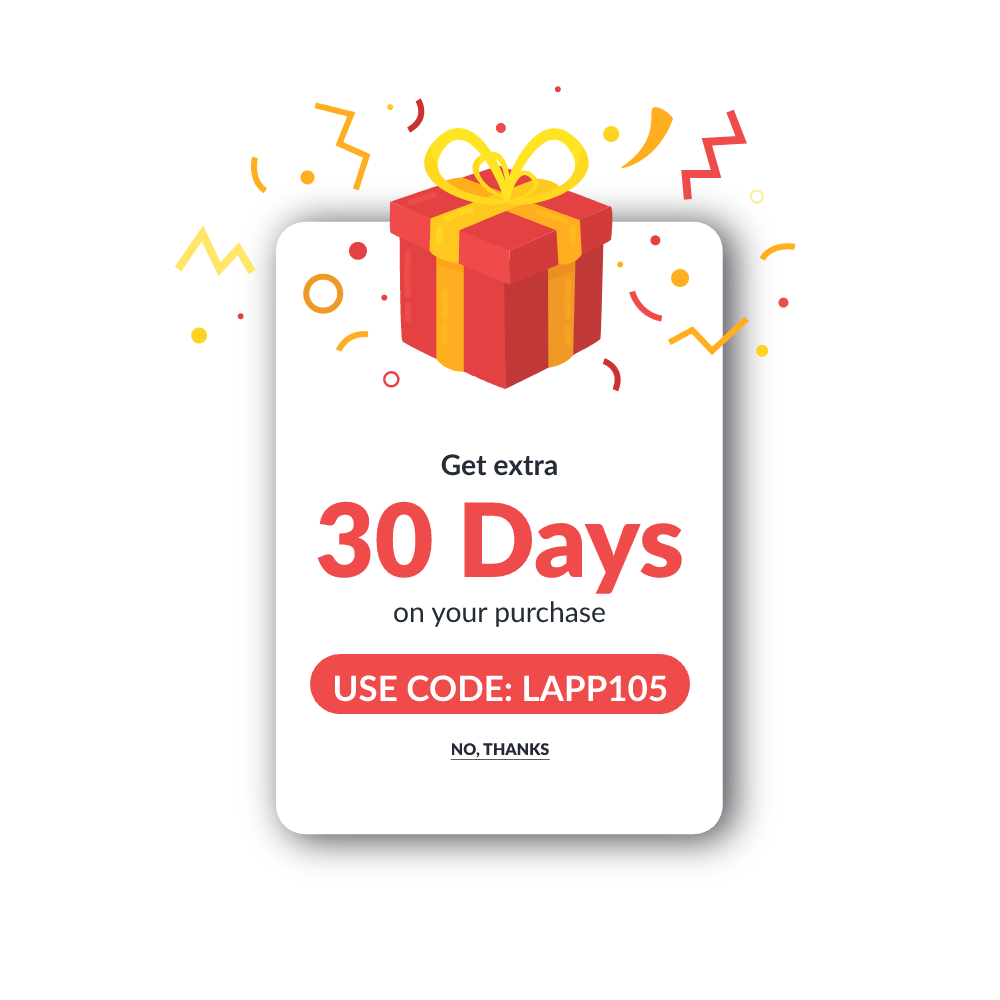
<style>
.page{position:relative;width:1000px;height:1000px;background:#ffffff}
.page>*{position:absolute;margin:0}
.t1{font:28.3px "Lato-Bold";color:#252b37}
.t2{font:102.2px "Lato-Black";color:#ef4b4b}
.t3{font:28.3px "Lato-Regular";color:#252b37}
.t4{font:35px "Lato-Bold";color:#ffffff;text-transform:uppercase}
.t5{font:16px "Lato-Black";color:#252b37;text-transform:uppercase;text-decoration:underline}
</style>
<div class="page">
<p class="t1" style="left:441px;top:454px;width:116px;height:22px">Get extra</p>
<p class="t2" style="left:317px;top:501px;width:365px;height:93px">30 Days</p>
<p class="t3" style="left:394px;top:601px;width:211px;height:26px">on your purchase</p>
<p class="t4" style="left:335px;top:675px;width:332px;height:27px">USE CODE: LAPP105</p>
<p class="t5" style="left:450px;top:743px;width:100px;height:17px">no, thanks</p>
</div>
